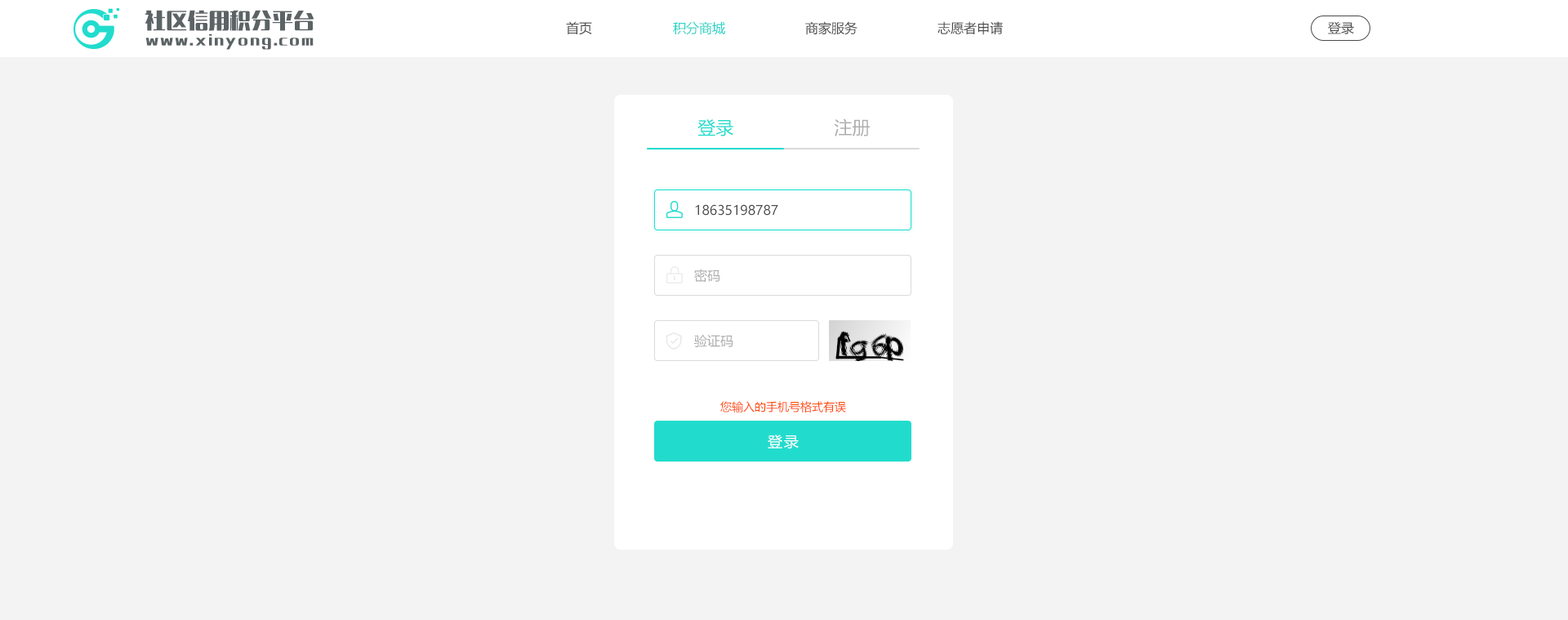
<style>
.page{position:relative;width:1568px;height:620px;background:#f3f3f3}
.page>*{position:absolute;margin:0}
.t1{font:21.2px "MFLangQian_Noncommercial-Bold";color:#5c6365}
.t2{font:13.1px "MicrosoftYaHei";color:#4a4a4a}
.t3{font:13.1px "MicrosoftYaHei";color:#25d4c6}
.t4{font:13.1px "MFLangQian_Noncommercial-Bold";letter-spacing:0.12em;color:#5c6365}
.t5{font:18px "MicrosoftYaHei";color:#21dccd}
.t6{font:18px "MicrosoftYaHei";color:#acacac}
.t7{font:13.1px "MicrosoftYaHei";color:#acacac}
.t8{font:11.4px "MicrosoftYaHei";color:#ff4800}
.t9{font:14.7px "MicrosoftYaHei";letter-spacing:0.1em;color:#ffffff}
</style>
<div class="page">
<p class="t1" style="left:145px;top:10px;width:169px;height:21px">社区信用积分平台</p>
<p class="t2" style="left:566px;top:21px;width:26px;height:14px">首页</p>
<p class="t3" style="left:673px;top:21px;width:52px;height:14px">积分商城</p>
<p class="t2" style="left:805px;top:21px;width:53px;height:14px">商家服务</p>
<p class="t2" style="left:938px;top:21px;width:65px;height:14px">志愿者申请</p>
<p class="t2" style="left:1328px;top:21px;width:26px;height:13px">登录</p>
<p class="t4" style="left:145px;top:33px;width:169px;height:17px">www.xinyong.com</p>
<p class="t5" style="left:697px;top:119px;width:36px;height:17px">登录</p>
<p class="t6" style="left:834px;top:118px;width:36px;height:18px">注册</p>
<p class="t2" style="left:695px;top:204px;width:83px;height:12px">18635198787</p>
<p class="t7" style="left:694px;top:269px;width:26px;height:13px">密码</p>
<p class="t7" style="left:694px;top:334px;width:39px;height:13px">验证码</p>
<p class="t8" style="left:720px;top:401px;width:126px;height:11px">您输入的手机号格式有误</p>
<p class="t9" style="left:768px;top:434px;width:31px;height:14px">登录</p>
</div>
